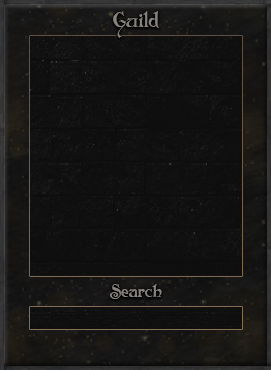
<style>
.page{position:relative;width:271px;height:370px}
.page>*{position:absolute;margin:0}
.t1{font:20.8px "Folkard";color:#88837e}
.t2{font:17.7px "Folkard";color:#88837e}
</style>
<div class="page">
<p class="t1" style="left:113px;top:11px;width:46px;height:27px">Guild</p>
<p class="t2" style="left:110px;top:284px;width:52px;height:15px">Search</p>
</div>
